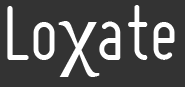
<style>
.page{position:relative;width:185px;height:87px;background:#333333}
.page>*{position:absolute;margin:0}
.t1{font:84.1px "Miso";color:#ffffff;scale:0.95 1}
.t2{font:79.1px "Georgia";color:#ffffff;scale:0.95 1}
</style>
<div class="page">
<p class="t1" style="left:7px;top:5px;width:168px;height:72px">Lo<span class="t2">χ</span>ate</p>
</div>
